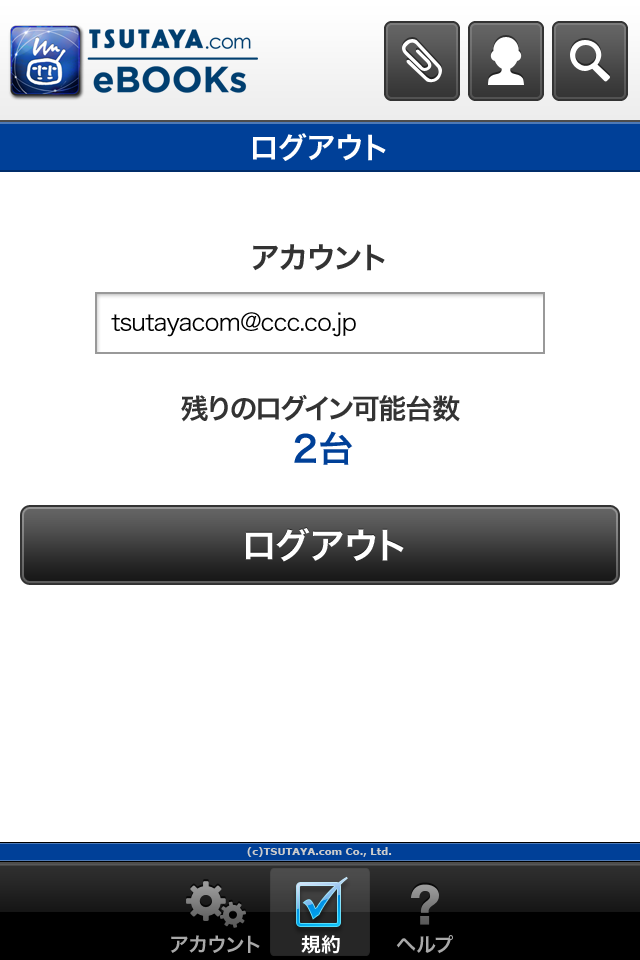
<style>
.page{position:relative;width:640px;height:960px;background:#ffffff}
.page>*{position:absolute;margin:0}
.t1{font:30px "HiraKakuPro-W6";color:#ffffff}
.t2{font:30px "HiraKakuPro-W6";color:#333333}
.t3{font:24px "HiraKakuPro-W3";letter-spacing:-0.04em;color:#000000}
.t4{font:28px "HiraKakuPro-W6";letter-spacing:-0.04em;color:#333333}
.t5{font:36px "HiraKakuPro-W6";letter-spacing:-0.04em;color:#004098}
.t6{font:36px "HiraKakuPro-W6";color:#ffffff}
.t7{font:10px "Verdana-Bold";color:#cccccc}
.t8{font:20px "HiraKakuPro-W6";color:#a8a8a8}
.t9{font:20px "HiraKakuPro-W6";color:#ffffff}
</style>
<div class="page">
<p class="t1" style="left:253px;top:133px;width:133px;height:28px">ログアウト</p>
<p class="t2" style="left:252px;top:244px;width:133px;height:27px">アカウント</p>
<p class="t3" style="left:111px;top:312px;width:245px;height:25px">tsutayacom@ccc.co.jp</p>
<p class="t4" style="left:181px;top:394px;width:279px;height:28px">残りのログイン可能台数</p>
<p class="t5" style="left:294px;top:431px;width:59px;height:34px">２台</p>
<p class="t6" style="left:245px;top:528px;width:159px;height:34px">ログアウト</p>
<p class="t7" style="left:247px;top:847px;width:145px;height:10px">(c)TSUTAYA.com Co., Ltd.</p>
<p class="t8" style="left:170px;top:935px;width:90px;height:18px">アカウント</p>
<p class="t9" style="left:301px;top:935px;width:39px;height:19px">規約</p>
<p class="t8" style="left:396px;top:935px;width:57px;height:19px">ヘルプ</p>
</div>
